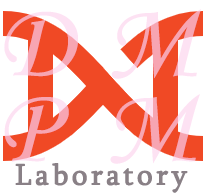
<style>
.page{position:relative;width:204px;height:193px;background:#ffffff}
.page>*{position:absolute;margin:0}
.t1{font:30px "Sylfaen";letter-spacing:0.1em;color:#898086;font-weight:bold}
</style>
<div class="page">
<p class="t1" style="left:15px;top:163px;width:173px;height:30px">Laboratory</p>
</div>
